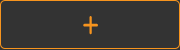
<style>
.page{position:relative;width:180px;height:50px;background:#333333}
.page>*{position:absolute;margin:0}
.t1{font:38.6px "Comfortaa-Light";color:#f7941e;scale:0.81 1}
</style>
<div class="page">
<p class="t1" style="left:83px;top:16px;width:15px;height:19px">+</p>
</div>
